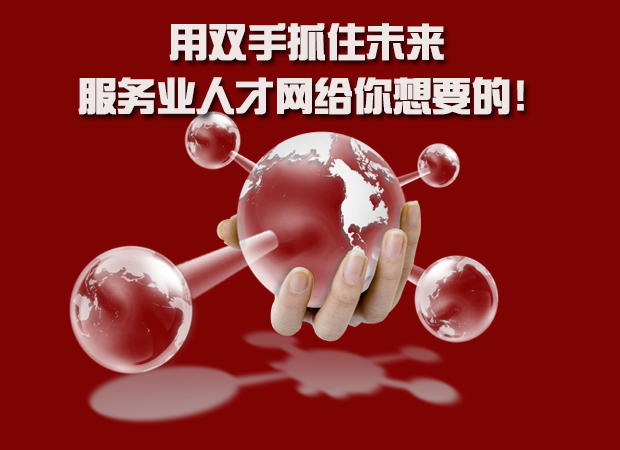
<style>
.page{position:relative;width:620px;height:450px;background:#7e0303}
.page>*{position:absolute;margin:0}
.t1{font:38px/54px "SingyiEG-Ultra-GB";letter-spacing:0.01em;color:#efe6e6;font-weight:bold}
</style>
<div class="page">
<p class="t1" style="left:78px;top:23px;width:446px;height:92px;text-align:center">用双手抓住未来 <br> 服务业人才网给你想要的！</p>
</div>
